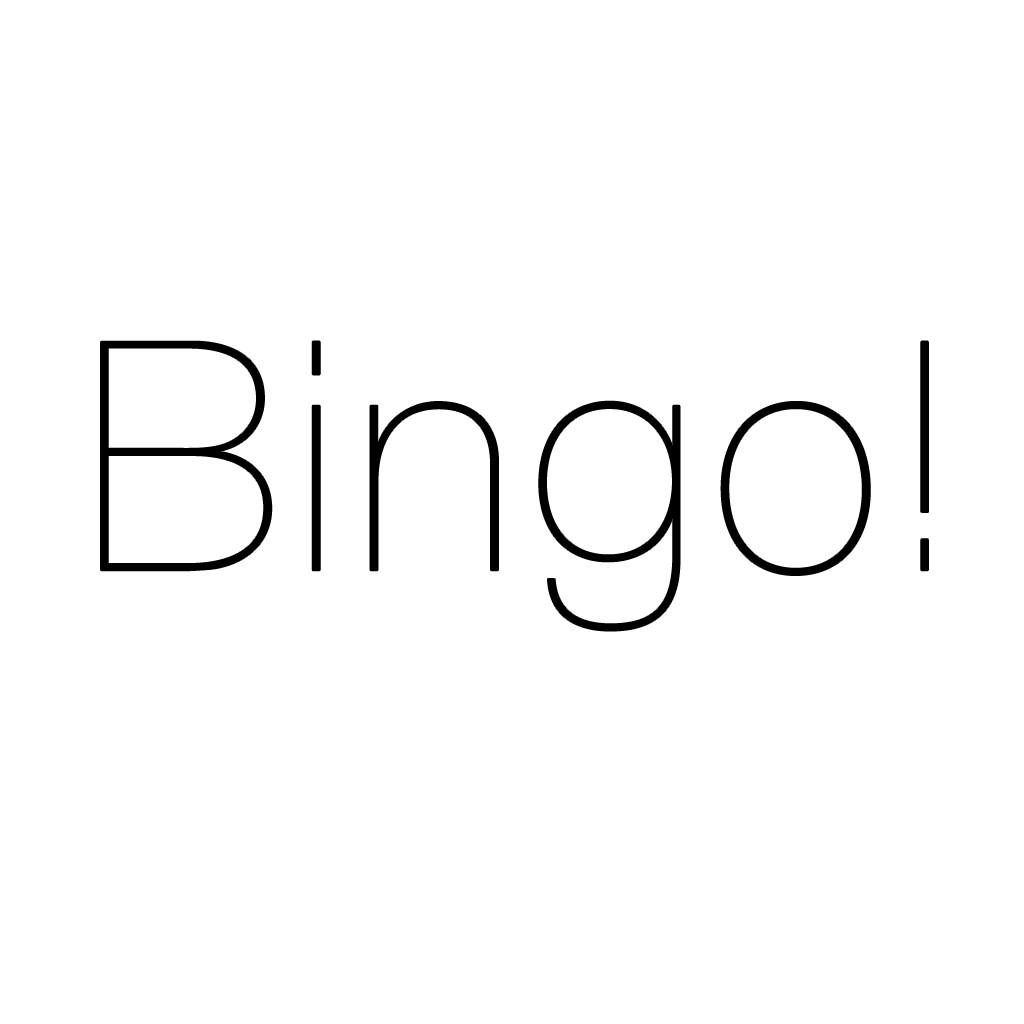
<style>
.page{position:relative;width:1024px;height:1024px;background:#ffffff}
.page>*{position:absolute;margin:0}
.t1{font:320.8px "HelveticaNeueCyr-UltraLight";letter-spacing:0.05em;color:#000000}
</style>
<div class="page">
<p class="t1" style="left:101px;top:341px;width:827px;height:290px">Bingo!</p>
</div>
